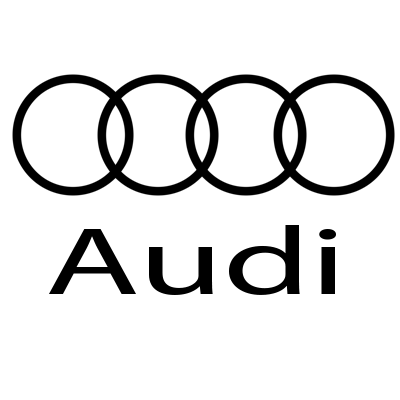
<style>
.page{position:relative;width:400px;height:400px;background:#ffffff}
.page>*{position:absolute;margin:0}
.t1{font:96.6px "MyriadPro-Regular";color:#000000;scale:1.6 1}
</style>
<div class="page">
<p class="t1" style="left:49px;top:225px;width:287px;height:70px">Audi</p>
</div>
